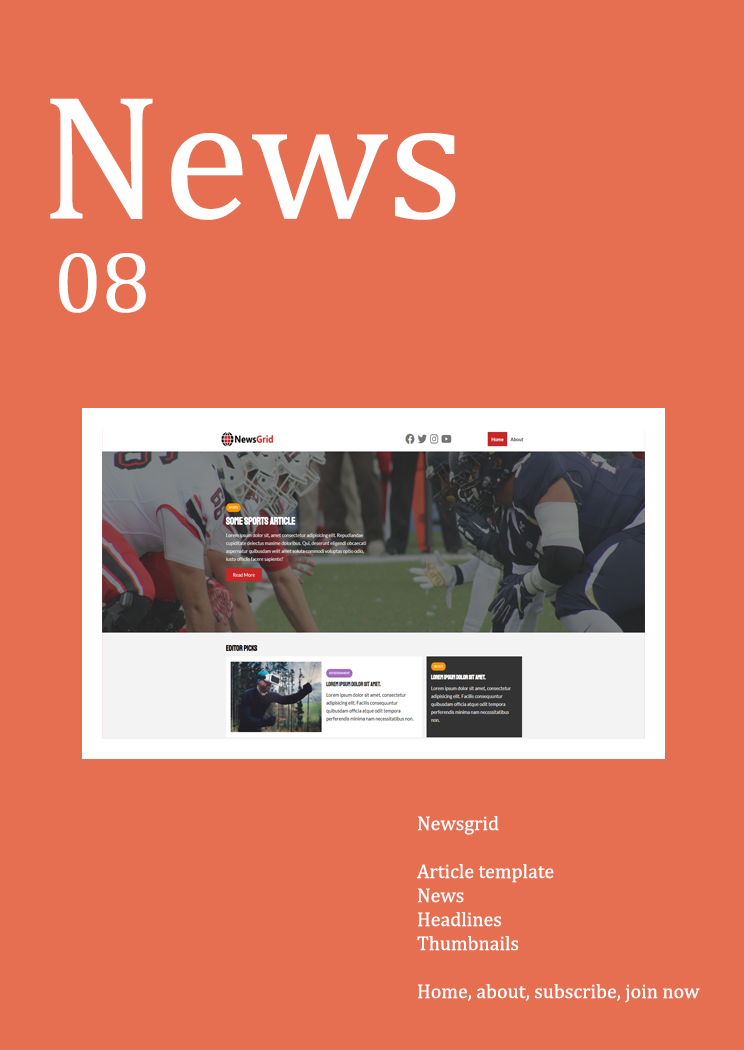
<style>
.page{position:relative;width:744px;height:1050px;background:#e76f51}
.page>*{position:absolute;margin:0}
.t1{font:179.3px "Cambria";color:#ffffff}
.t2{font:87.3px "Cambria";color:#ffffff}
.t3{font:20px "Cambria";color:#ffffff}
</style>
<div class="page">
<p class="t1" style="left:50px;top:98px;width:406px;height:122px">News</p>
<p class="t2" style="left:59px;top:253px;width:87px;height:60px">08</p>
<p class="t3" style="left:417px;top:816px;width:283px;height:187px">Newsgrid<br><br>Article template<br>News<br>Headlines<br>Thumbnails<br><br>Home, about, subscribe, join now</p>
</div>
